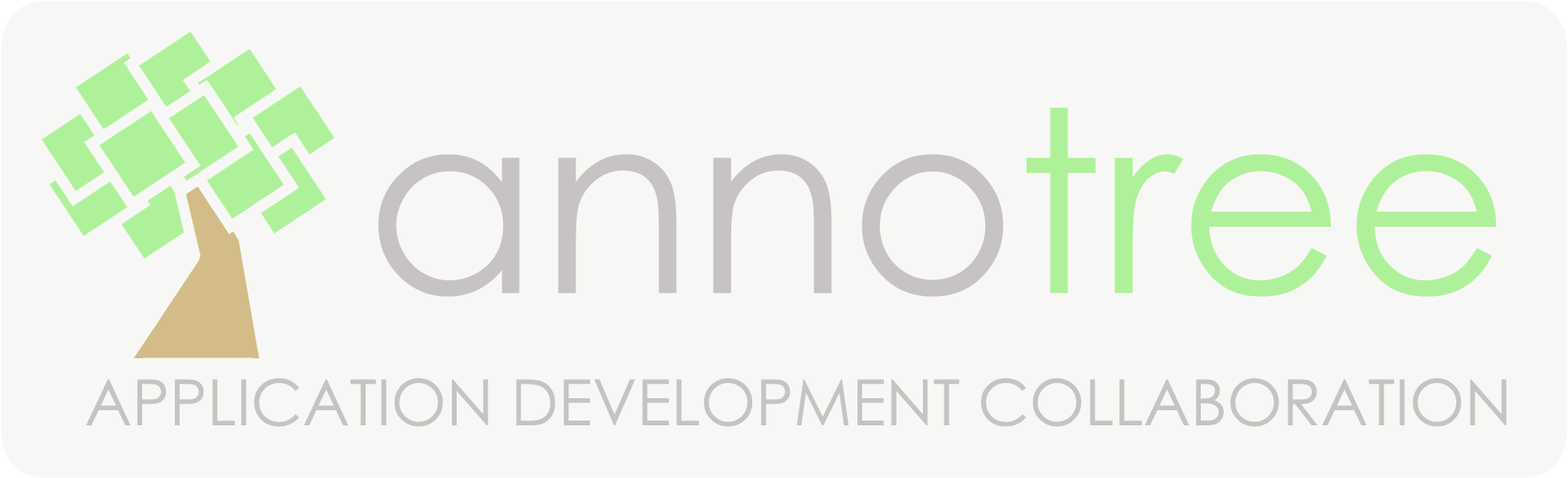
<style>
.page{position:relative;width:1568px;height:478px;background:#f7f8f5}
.page>*{position:absolute;margin:0}
.t1{font:254.4px "CenturyGothic";color:#c7c3c3}
.t2{font:254.4px "CenturyGothic";color:#aff19a}
.t3{font:63.6px "CenturyGothic";color:#c7c3c3}
</style>
<div class="page">
<p class="t1" style="left:378px;top:108px;width:1119px;height:189px">anno<span class="t2">tree</span></p>
<p class="t3" style="left:86px;top:378px;width:1421px;height:49px">APPLICATION DEVELOPMENT COLLABORATION</p>
</div>
